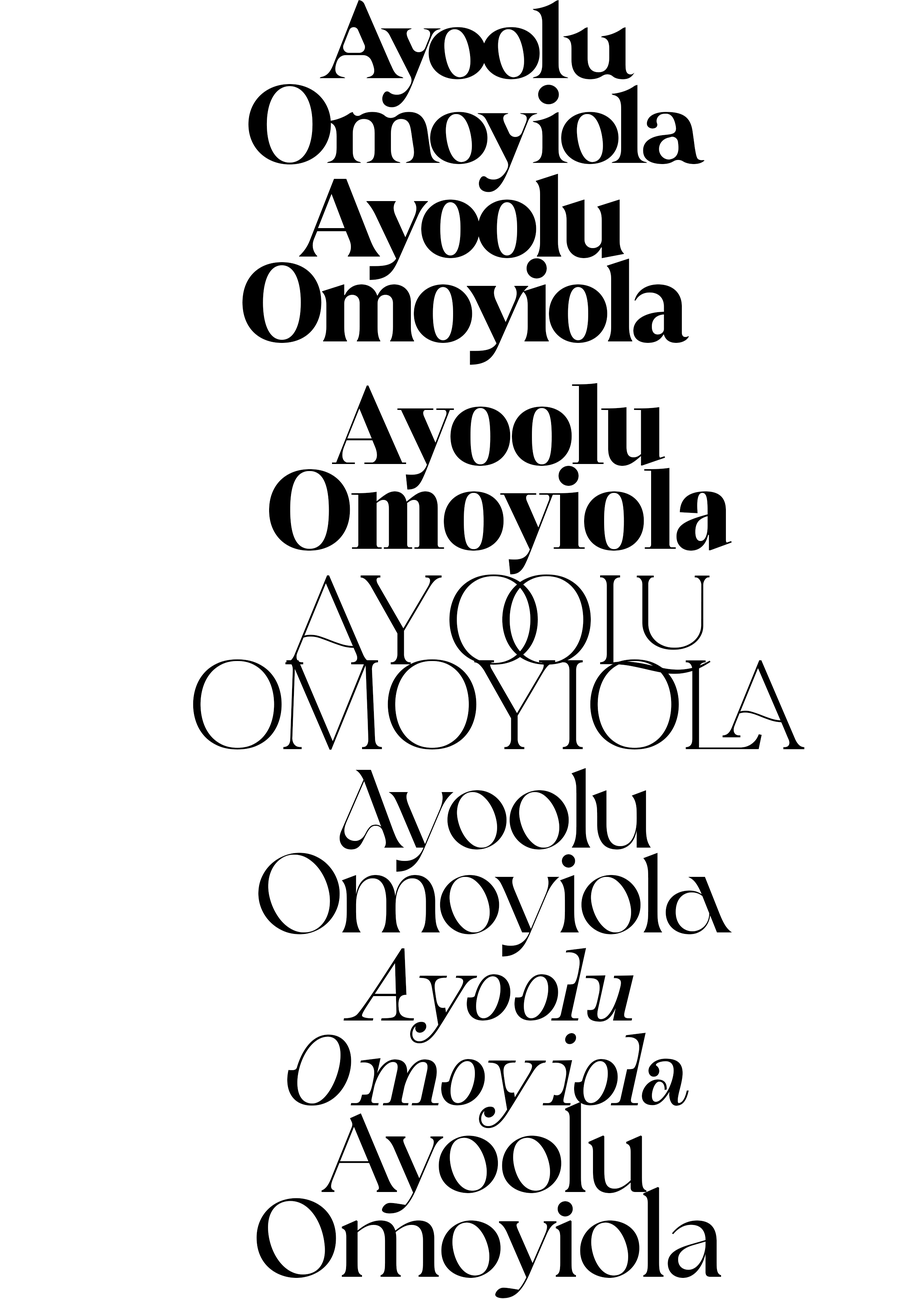
<style>
.page{position:relative;width:918px;height:1299px;background:#ffffff}
.page>*{position:absolute;margin:0}
.t1{font:111.1px/84.8px "Modyst-Regular";letter-spacing:-0.075em;color:#000000}
.t2{font:111.1px/84.8px "FONTSPRINGDEMO-TTRamillasExtraBoldRegular";letter-spacing:-0.075em;color:#000000}
.t3{font:111.1px/84.8px "TTLivretDisplay-Bd";letter-spacing:-0.025em;color:#000000}
.t4{font:111.1px/84.8px "LaLuxesSerif";letter-spacing:-0.025em;color:#000000}
.t5{font:111.1px/84.8px "Crake-Regular";letter-spacing:-0.025em;color:#000000}
.t6{font:111.1px/84.8px "Herlyon";letter-spacing:-0.025em;color:#000000}
.t7{font:111.1px/84.8px "FONTSPRINGDEMO-TheSeasonsBold";letter-spacing:-0.025em;color:#000000}
</style>
<div class="page">
<p class="t1" style="left:248px;top:0px;width:457px;height:192px;text-align:center">Ayoolu<br>Omoyiola</p>
<p class="t2" style="left:242px;top:174px;width:447px;height:191px;text-align:center">Ayoolu<br>Omoyiola</p>
<p class="t3" style="left:269px;top:383px;width:463px;height:191px;text-align:center">Ayoolu<br>Omoyiola</p>
<p class="t4" style="left:193px;top:574px;width:611px;height:176px;text-align:center">Ayoolu<br>Omoyiola</p>
<p class="t5" style="left:258px;top:768px;width:474px;height:188px;text-align:center">Ayoolu<br>Omoyiola</p>
<p class="t6" style="left:287px;top:948px;width:402px;height:180px;text-align:center">Ayoolu<br>Omoyiola</p>
<p class="t7" style="left:257px;top:1102px;width:464px;height:196px;text-align:center">Ayoolu<br>Omoyiola</p>
</div>
